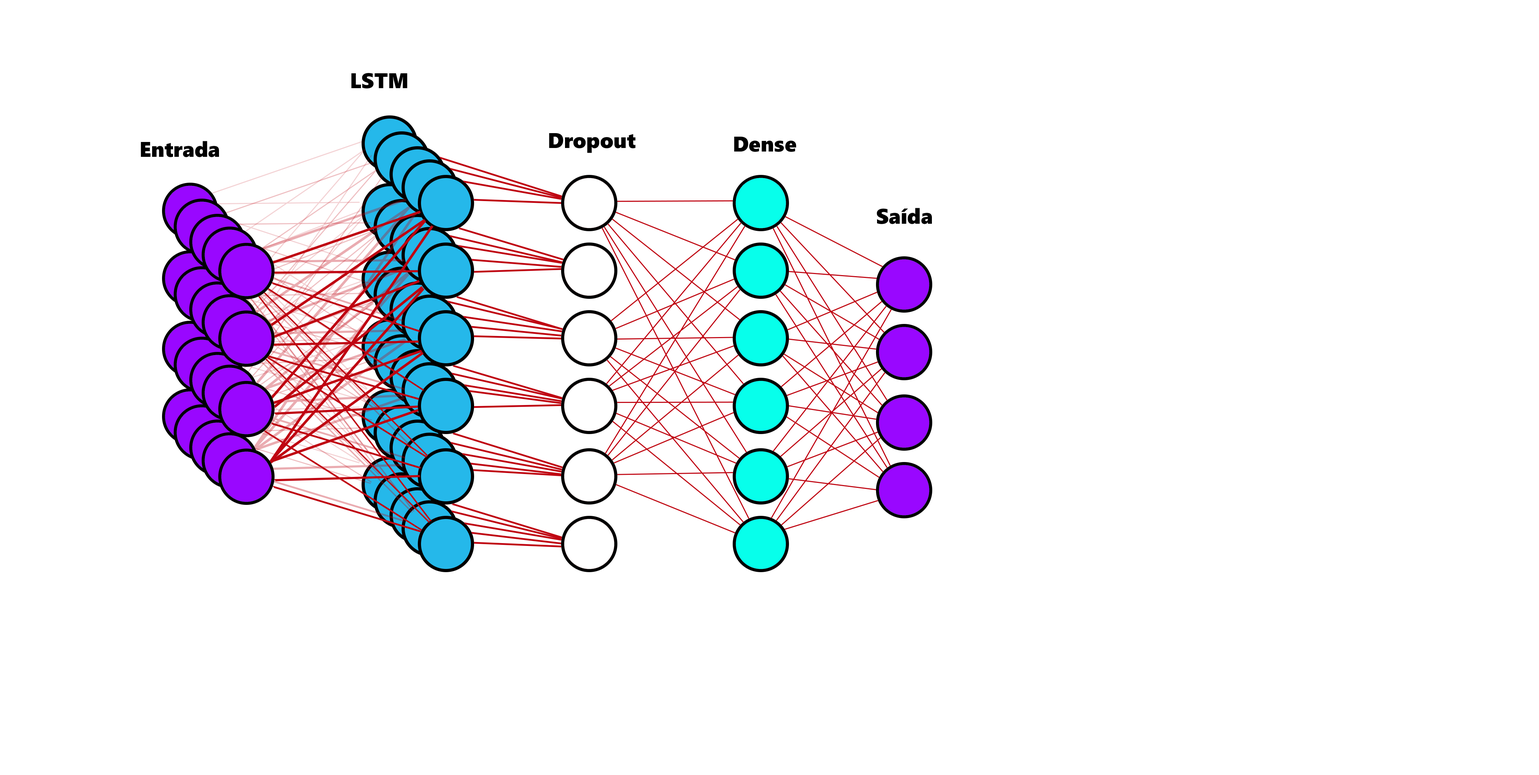
<style>
.page{position:relative;width:1539px;height:775px;background:#ffffff}
.page>*{position:absolute;margin:0}
.t1{font:21.2px "SegoeWP-Black";color:#000000}
</style>
<div class="page">
<p class="t1" style="left:351px;top:73px;width:56px;height:15px">LSTM</p>
<p class="t1" style="left:549px;top:133px;width:87px;height:20px">Dropout</p>
<p class="t1" style="left:734px;top:137px;width:63px;height:15px">Dense</p>
<p class="t1" style="left:141px;top:141px;width:78px;height:16px">Entrada</p>
<p class="t1" style="left:877px;top:208px;width:55px;height:16px">Saída</p>
</div>
